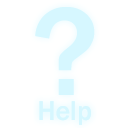
<style>
.page{position:relative;width:128px;height:128px;background:#ffffff}
.page>*{position:absolute;margin:0}
.t1{font:129.9px "FranklinGothic-Medium";color:#d6f7ff}
.t2{font:28px "FranklinGothic-Medium";color:#d6f7ff}
</style>
<div class="page">
<p class="t1" style="left:35px;top:7px;width:60px;height:88px">?</p>
<p class="t2" style="left:39px;top:101px;width:52px;height:24px">Help</p>
<p class="t2" style="left:39px;top:101px;width:52px;height:24px">Help</p>
</div>
